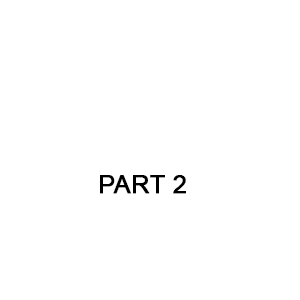
<style>
.page{position:relative;width:300px;height:300px;background:#ffffff}
.page>*{position:absolute;margin:0}
.t1{font:25.4px "ArialMT";color:#000000;font-weight:bold}
</style>
<div class="page">
<p class="t1" style="left:100px;top:175px;width:86px;height:19px">PART 2</p>
</div>
